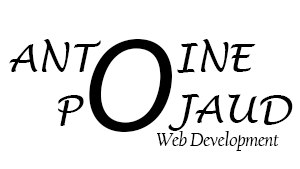
<style>
.page{position:relative;width:300px;height:169px;background:#ffffff}
.page>*{position:absolute;margin:0}
.t1{font:39.1px "LucidaHandwriting-Italic";color:#000000}
.t2{font:135.6px "MyriadPro-It";color:#000000}
.t3{font:19.6px "CalifornianFB-Italic";color:#000000}
</style>
<div class="page">
<p class="t1" style="left:9px;top:39px;width:247px;height:34px">ANT      INE</p>
<p class="t2" style="left:89px;top:39px;width:83px;height:93px">O</p>
<p class="t1" style="left:58px;top:94px;width:235px;height:37px">P       JAUD</p>
<p class="t3" style="left:157px;top:131px;width:122px;height:20px">Web Development</p>
</div>
